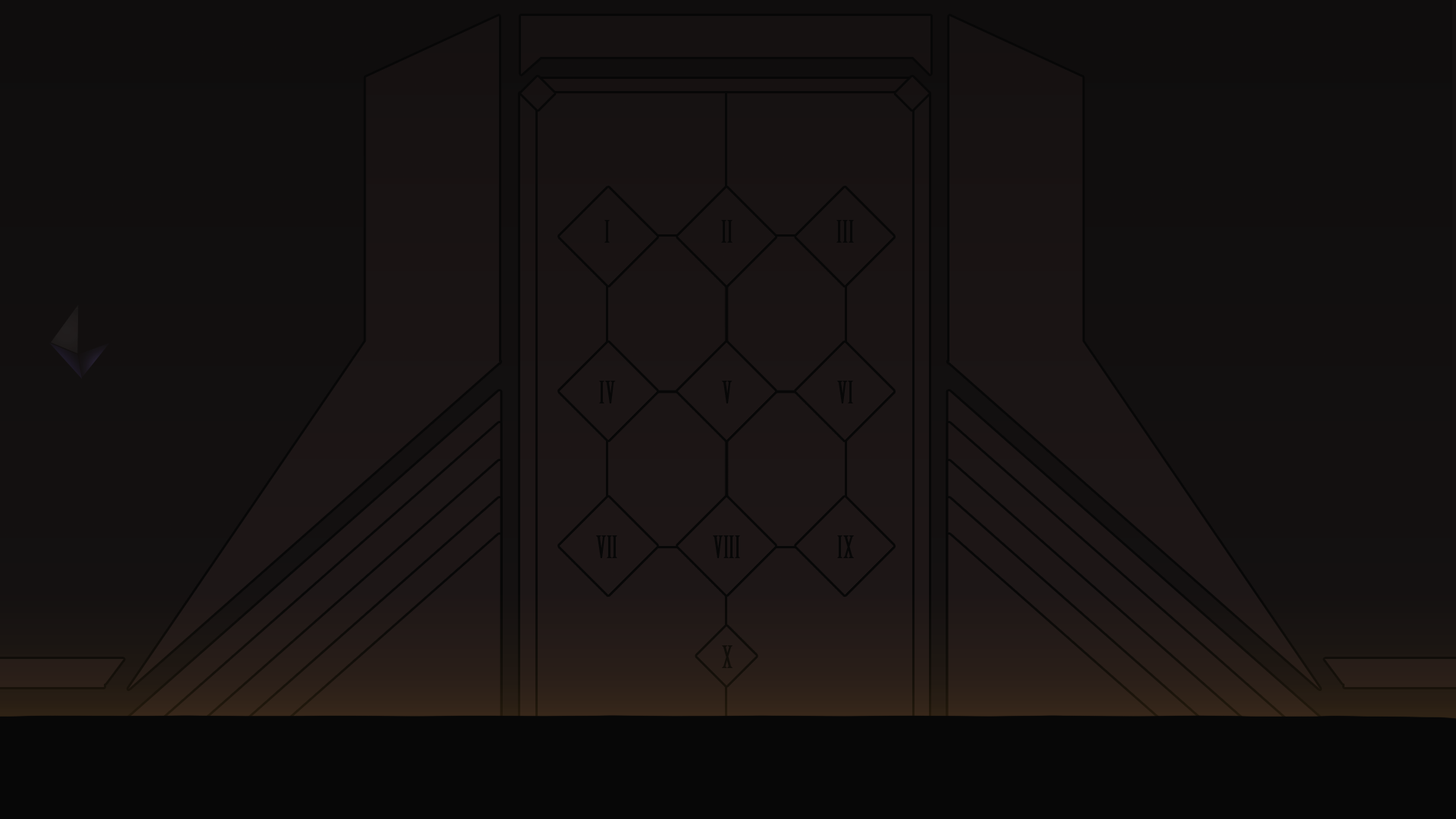
<style>
.page{position:relative;width:1456px;height:819px}
.page>*{position:absolute;margin:0}
.t1{font:30.5px "BirchStd";color:#070707}
</style>
<div class="page">
<p class="t1" style="left:604px;top:220px;width:6px;height:23px">I</p>
<p class="t1" style="left:721px;top:220px;width:12px;height:23px">II</p>
<p class="t1" style="left:836px;top:220px;width:18px;height:23px">III</p>
<p class="t1" style="left:599px;top:381px;width:17px;height:22px">IV</p>
<p class="t1" style="left:722px;top:381px;width:11px;height:22px">V</p>
<p class="t1" style="left:837px;top:381px;width:16px;height:22px">VI</p>
<p class="t1" style="left:596px;top:535px;width:21px;height:23px">VII</p>
<p class="t1" style="left:713px;top:535px;width:27px;height:23px">VIII</p>
<p class="t1" style="left:837px;top:535px;width:17px;height:23px">IX</p>
<p class="t1" style="left:722px;top:645px;width:11px;height:23px">X</p>
</div>
